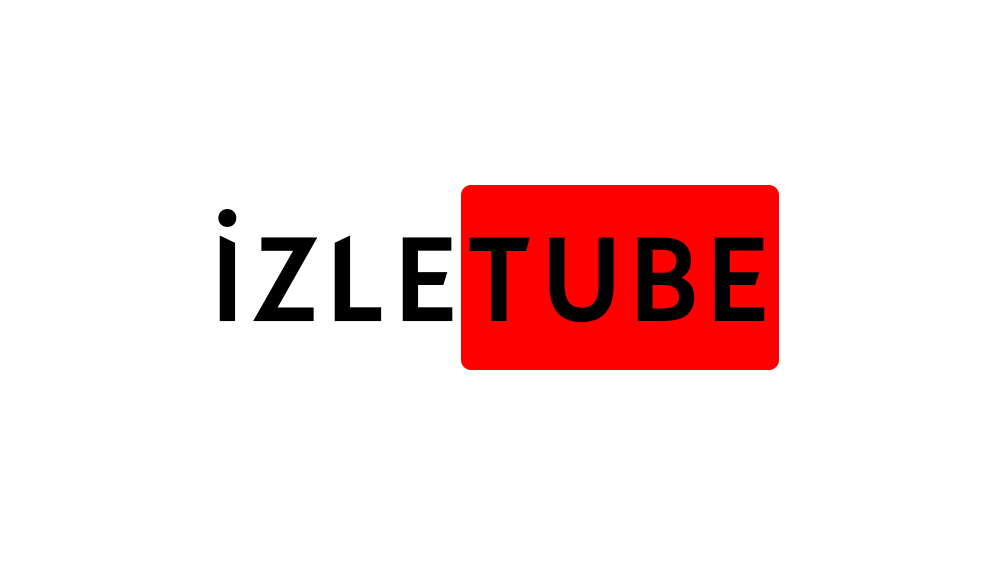
<style>
.page{position:relative;width:1000px;height:566px;background:#ffffff}
.page>*{position:absolute;margin:0}
.t1{font:135px "YouTube-Sans-Medium";letter-spacing:0.08em;color:#010000}
</style>
<div class="page">
<p class="t1" style="left:218px;top:209px;width:547px;height:114px">İZLETUBE</p>
</div>
